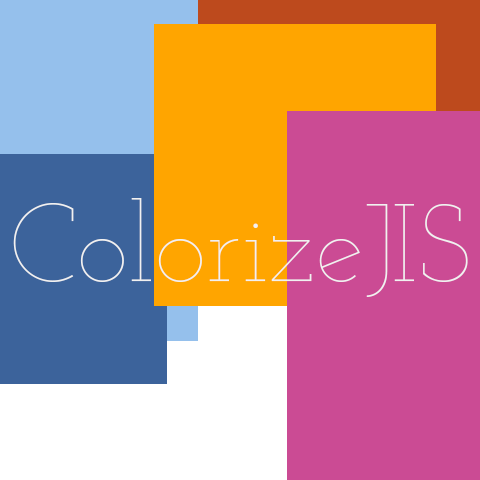
<style>
.page{position:relative;width:480px;height:480px;background:#cb4b94}
.page>*{position:absolute;margin:0}
.t1{font:110px "JosefinSlab-Thin";color:#f1f1f1}
</style>
<div class="page">
<p class="t1" style="left:13px;top:198px;width:455px;height:99px">ColorizeJIS</p>
</div>
